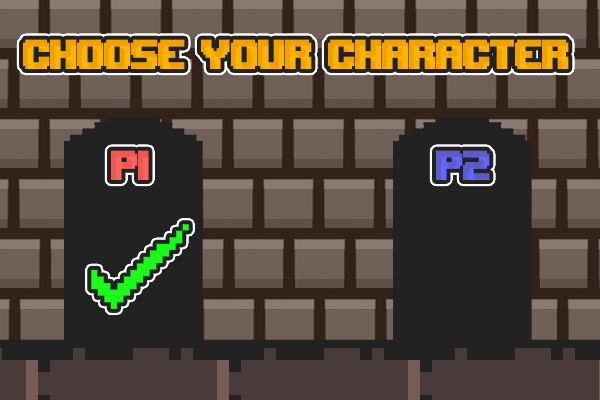
<style>
.page{position:relative;width:600px;height:400px;background:#222222}
.page>*{position:absolute;margin:0}
.t1{font:60px "Upheaval -BRK-";color:#ffb400;font-weight:bold;scale:0.8 1}
.t2{font:60px "Upheaval -BRK-";color:#ff6262;font-weight:bold;scale:0.8 1}
.t3{font:60px "Upheaval -BRK-";font-weight:bold;scale:0.8 1}
</style>
<div class="page">
<p class="t1" style="left:23px;top:39px;width:546px;height:30px">CHOOSE YOUR CHARACTER</p>
<p class="t2" style="left:111px;top:150px;width:38px;height:30px">P1</p>
<p class="t3" style="left:436px;top:150px;width:54px;height:30px">P2</p>
</div>
